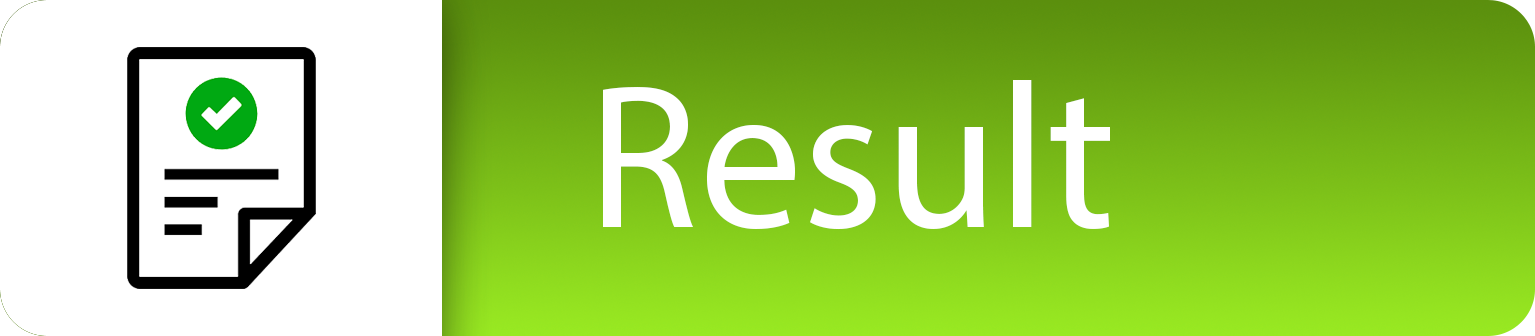
<style>
.page{position:relative;width:1535px;height:336px;background:#ffffff}
.page>*{position:absolute;margin:0}
.t1{font:206.4px "MyriadPro-Regular";color:#ffffff}
</style>
<div class="page">
<p class="t1" style="left:603px;top:80px;width:507px;height:150px">Result</p>
</div>
